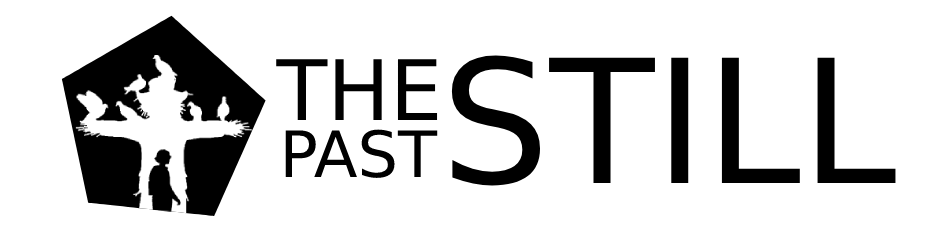
<style>
.page{position:relative;width:939px;height:240px;background:#ffffff}
.page>*{position:absolute;margin:0}
.t1{font:83.2px "DejaVuSans";color:#000000}
.t2{font:171.7px "DejaVuSans";color:#000000}
.t3{font:63.9px "DejaVuSans";color:#000000}
</style>
<div class="page">
<p class="t1" style="left:276px;top:59px;width:162px;height:61px">THE</p>
<p class="t2" style="left:451px;top:55px;width:445px;height:131px">STILL</p>
<p class="t3" style="left:285px;top:129px;width:153px;height:49px">PAST</p>
</div>
